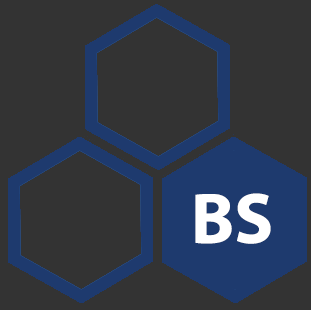
<style>
.page{position:relative;width:311px;height:310px;background:#333333}
.page>*{position:absolute;margin:0}
.t1{font:72px "MyriadPro-Bold";color:#ffffff}
</style>
<div class="page">
<p class="t1" style="left:195px;top:193px;width:76px;height:51px">BS</p>
</div>
